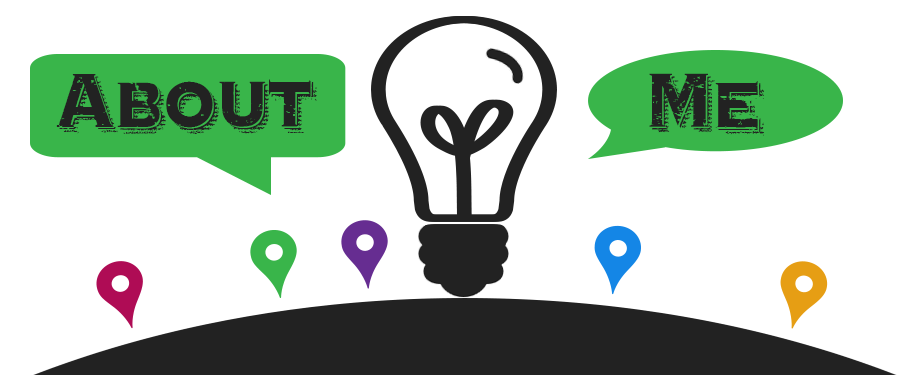
<style>
.page{position:relative;width:923px;height:375px;background:#ffffff}
.page>*{position:absolute;margin:0}
.t1{font:141.7px "WebSymbols-Regular";color:#39b54a;scale:1.96 1}
.t2{font:108.4px "WebSymbols-Regular";color:#39b54a;scale:2 1}
.t3{font:72px "Hooverville";color:#222222}
</style>
<div class="page">
<p class="t1" style="left:30px;top:54px;width:316px;height:141px">c</p>
<p class="t2" style="left:588px;top:50px;width:255px;height:109px">d</p>
<p class="t3" style="left:56px;top:73px;width:708px;height:63px">About                        Me</p>
</div>
